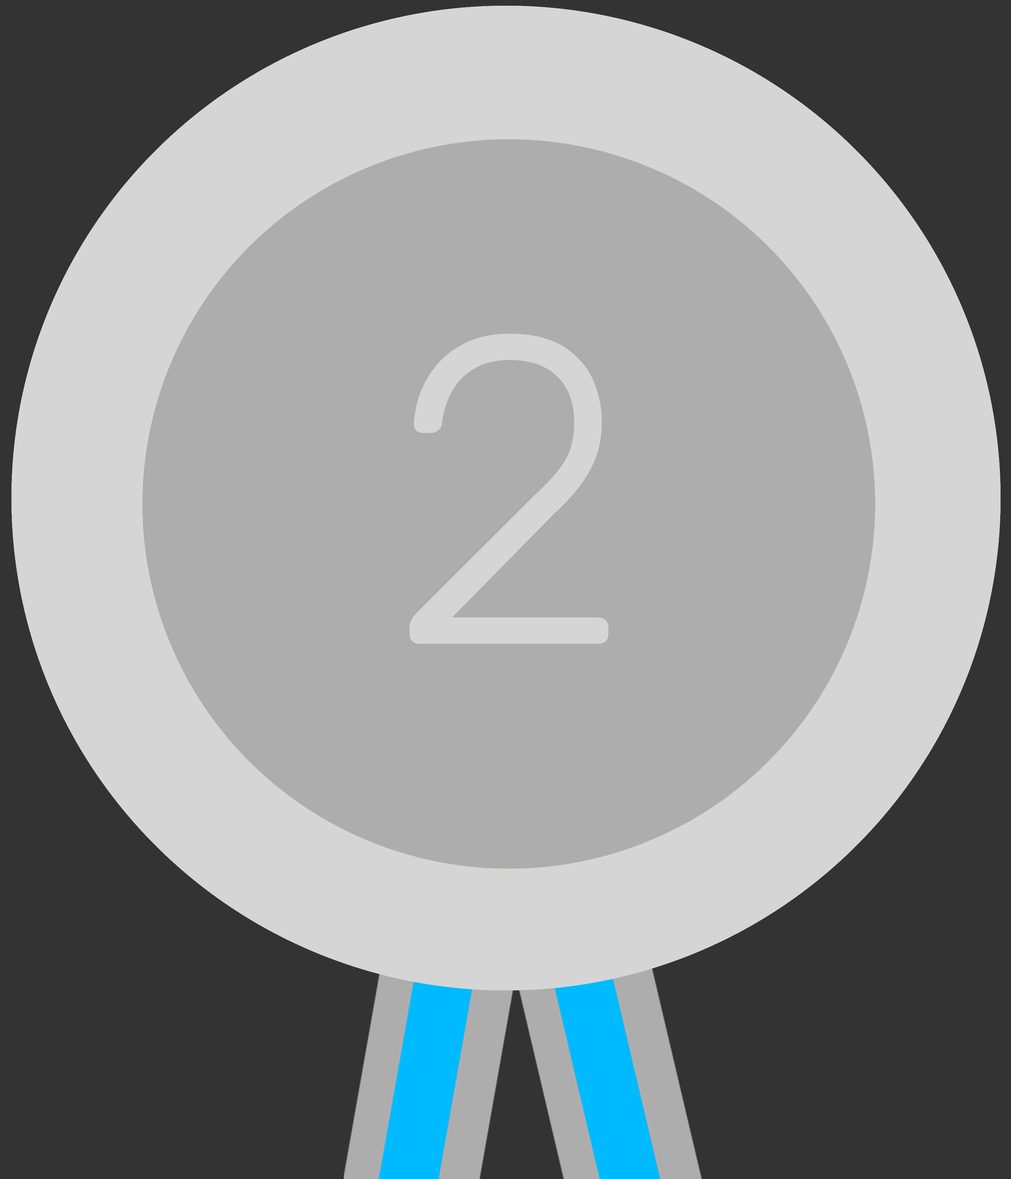
<style>
.page{position:relative;width:1011px;height:1179px;background:#adadad}
.page>*{position:absolute;margin:0}
.t1{font:436.7px "Rubik-Light";color:#d5d5d5}
</style>
<div class="page">
<p class="t1" style="left:409px;top:334px;width:200px;height:310px">2</p>
</div>
